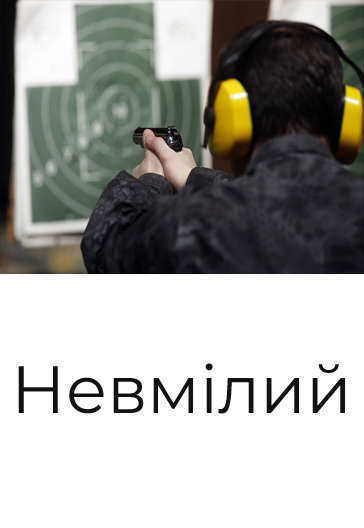
<style>
.page{position:relative;width:364px;height:528px;background:#ffffff}
.page>*{position:absolute;margin:0}
.t1{font:66.7px "Montserrat-Regular";color:#121212}
</style>
<div class="page">
<p class="t1" style="left:18px;top:363px;width:327px;height:51px">Невмілий</p>
</div>
